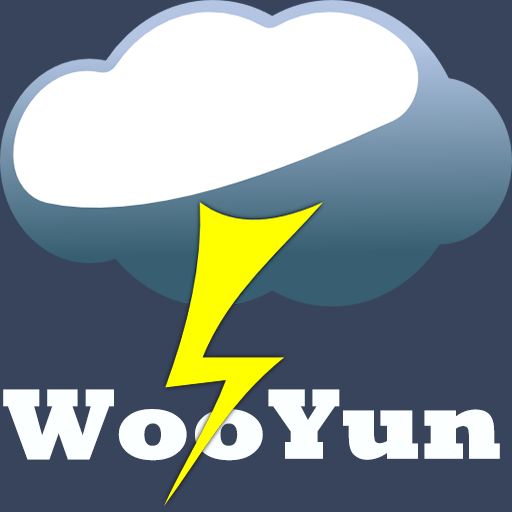
<style>
.page{position:relative;width:512px;height:512px;background:#38435c}
.page>*{position:absolute;margin:0}
.t1{font:101.5px "Rockwell-ExtraBold";color:#fbffff}
</style>
<div class="page">
<p class="t1" style="left:3px;top:389px;width:497px;height:72px">WooYun</p>
</div>
